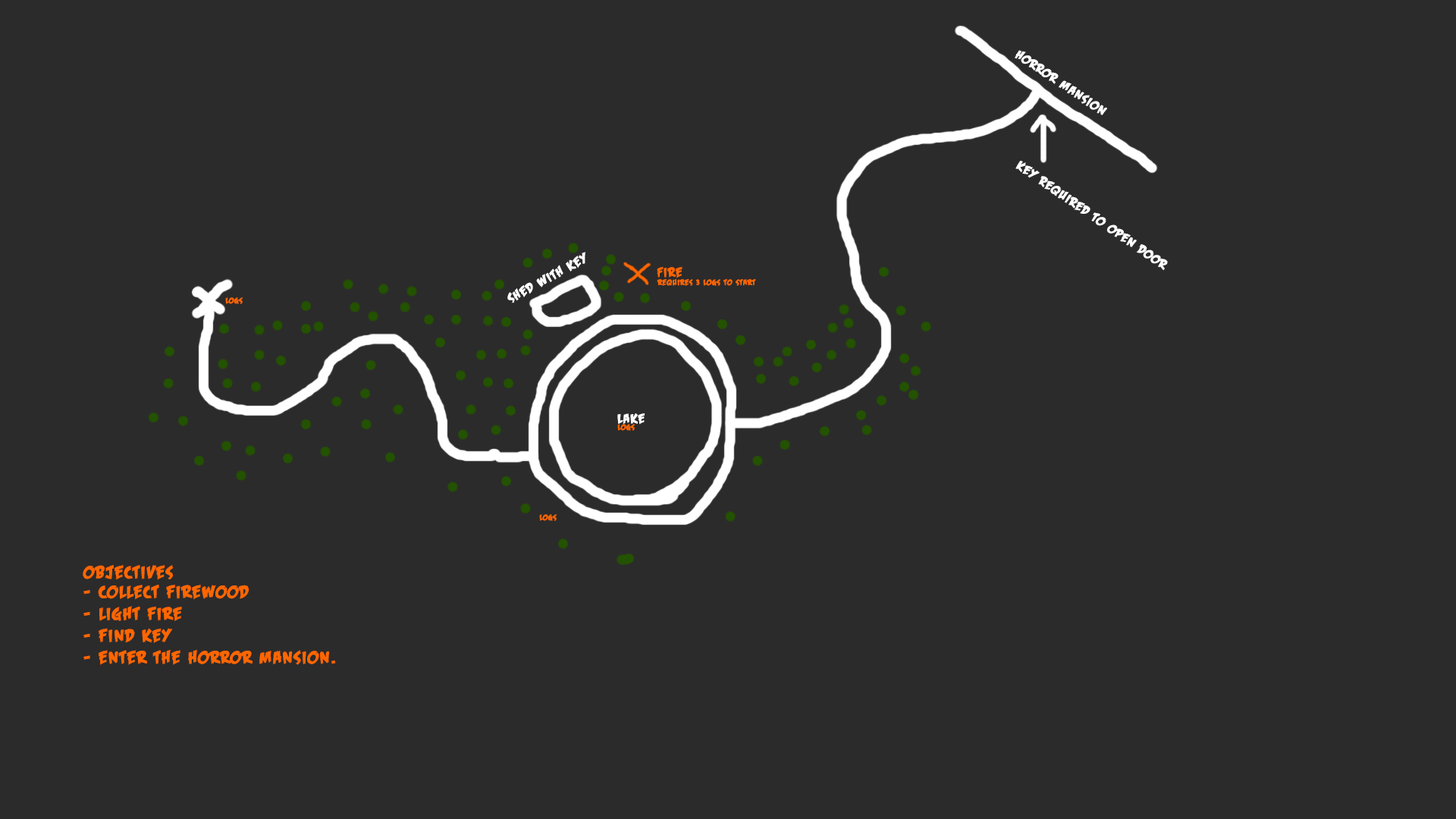
<style>
.page{position:relative;width:1456px;height:819px;background:#2b2b2b}
.page>*{position:absolute;margin:0}
.t1{font:13.6px "FeastofFleshBB";letter-spacing:0.1em;color:#ffffff}
.t2{font:13.6px "FeastofFleshBB";letter-spacing:0.1em;color:#ff6600}
.t3{font:8.3px "FeastofFleshBB";letter-spacing:0.1em;color:#ff6600}
.t4{font:18.2px "FeastofFleshBB";letter-spacing:0.1em;color:#ff6600}
</style>
<div class="page">
<p class="t1" style="left:1015px;top:50px;width:92px;height:65px;rotate:34deg">horror mansion</p>
<p class="t1" style="left:1015px;top:161px;width:153px;height:110px;rotate:35deg">Key Required to open door</p>
<p class="t1" style="left:507px;top:252px;width:78px;height:51px;rotate:-29deg">Shed with key</p>
<p class="t2" style="left:657px;top:266px;width:25px;height:12px">Fire</p>
<p class="t3" style="left:657px;top:278px;width:99px;height:8px">requires 3 logs to start</p>
<p class="t3" style="left:225px;top:297px;width:18px;height:7px">logs</p>
<p class="t1" style="left:617px;top:413px;width:28px;height:12px">Lake</p>
<p class="t3" style="left:617px;top:424px;width:18px;height:7px">logs</p>
<p class="t3" style="left:539px;top:514px;width:18px;height:7px">logs</p>
<p class="t4" style="left:83px;top:565px;width:91px;height:15px">Objectives</p>
<p class="t4" style="left:83px;top:585px;width:253px;height:80px">- collect firewood<br>- light fire<br>- find key<br>- enter the horror mansion.</p>
</div>
